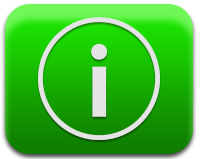
<style>
.page{position:relative;width:200px;height:159px}
.page>*{position:absolute;margin:0}
.t1{font:130px "KozGoPr6N-Bold";color:#e4e4e4}
</style>
<div class="page">
<p class="t1" style="left:38px;top:17px;width:123px;height:124px">i</p>
</div>
